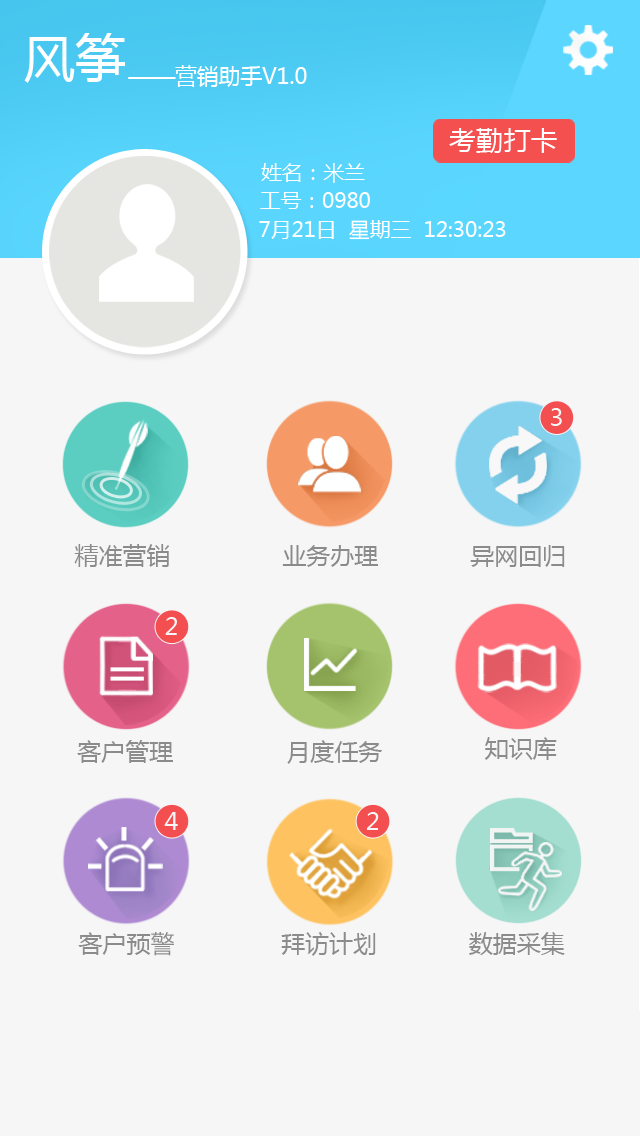
<style>
.page{position:relative;width:640px;height:1136px;background:#f6f6f6}
.page>*{position:absolute;margin:0}
.t1{font:51.2px "MicrosoftYaHei";color:#ffffff}
.t2{font:21.7px "MicrosoftYaHei";color:#ffffff}
.t3{font:27.2px "MicrosoftYaHei";color:#ffffff}
.t4{font:20.8px "MicrosoftYaHei";color:#ffffff}
.t5{font:24px "MicrosoftYaHei";color:#f6f6f6}
.t6{font:24px "MicrosoftYaHei";color:#8b8b8b}
</style>
<div class="page">
<p class="t1" style="left:24px;top:33px;width:101px;height:50px">风筝</p>
<p class="t2" style="left:128px;top:65px;width:179px;height:22px">——营销助手V1.0</p>
<p class="t3" style="left:449px;top:128px;width:108px;height:25px">考勤打卡</p>
<p class="t4" style="left:261px;top:163px;width:104px;height:20px">姓名：米兰</p>
<p class="t4" style="left:260px;top:192px;width:110px;height:17px">工号：0980</p>
<p class="t4" style="left:259px;top:220px;width:247px;height:20px">7月21日  星期三  12:30:23</p>
<p class="t5" style="left:551px;top:408px;width:11px;height:18px">3</p>
<p class="t6" style="left:74px;top:544px;width:96px;height:23px">精准营销</p>
<p class="t6" style="left:282px;top:545px;width:96px;height:22px">业务办理</p>
<p class="t6" style="left:470px;top:545px;width:95px;height:22px">异网回归</p>
<p class="t5" style="left:165px;top:617px;width:12px;height:18px">2</p>
<p class="t6" style="left:484px;top:737px;width:73px;height:23px">知识库</p>
<p class="t6" style="left:77px;top:740px;width:96px;height:23px">客户管理</p>
<p class="t6" style="left:287px;top:740px;width:95px;height:24px">月度任务</p>
<p class="t5" style="left:164px;top:812px;width:14px;height:18px">4</p>
<p class="t5" style="left:367px;top:812px;width:12px;height:18px">2</p>
<p class="t6" style="left:78px;top:932px;width:96px;height:24px">客户预警</p>
<p class="t6" style="left:281px;top:932px;width:95px;height:24px">拜访计划</p>
<p class="t6" style="left:469px;top:932px;width:96px;height:23px">数据采集</p>
</div>
